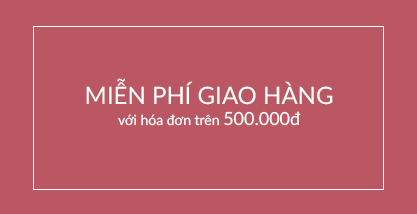
<style>
.page{position:relative;width:417px;height:214px;background:#bb5663}
.page>*{position:absolute;margin:0}
.t1{font:24px "Lato-Regular";color:#ffffff}
.t2{font:14px "Lato-Regular";color:#ffffff}
.t3{font:18px "Lato-Regular";color:#ffffff}
</style>
<div class="page">
<p class="t1" style="left:86px;top:78px;width:247px;height:48px;text-align:center">MIỄN PHÍ GIAO HÀNG<br><span class="t2">với hóa đơn trên </span><span class="t3">500.000đ</span></p>
</div>
